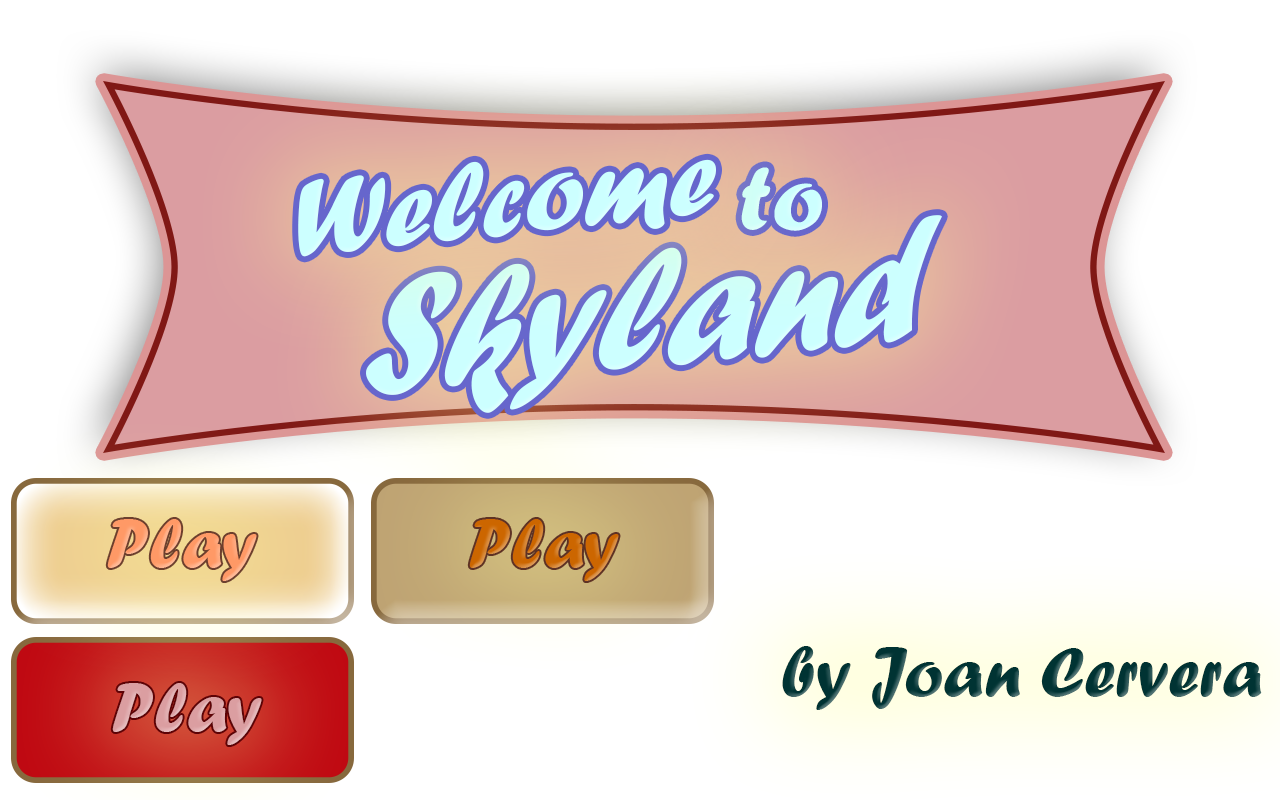
<style>
.page{position:relative;width:1280px;height:800px;background:#ffffff}
.page>*{position:absolute;margin:0}
.t1{font:114.3px "ForteMT";color:#ccffff}
.t2{font:95.8px "ForteMT";color:#ccffff}
.t3{font:180.3px "ForteMT";color:#ccffff;scale:0.86 1}
.t4{font:72px "ForteMT";color:#ff9966}
.t5{font:72px "ForteMT";color:#cc6600}
.t6{font:72px "ForteMT";color:#003333}
.t7{font:72px "ForteMT";color:#db9ea1}
</style>
<div class="page">
<p class="t1" style="left:298px;top:159px;width:418px;height:98px;rotate:-6deg">Welcome</p>
<p class="t2" style="left:741px;top:167px;width:81px;height:64px;rotate:-1deg">to</p>
<p class="t3" style="left:366px;top:215px;width:576px;height:198px;rotate:-6deg">Skyland</p>
<p class="t4" style="left:107px;top:519px;width:150px;height:62px">Play</p>
<p class="t5" style="left:469px;top:519px;width:150px;height:62px">Play</p>
<p class="t6" style="left:782px;top:646px;width:480px;height:64px">by Joan Cervera</p>
<p class="t7" style="left:112px;top:683px;width:150px;height:62px">Play</p>
</div>
